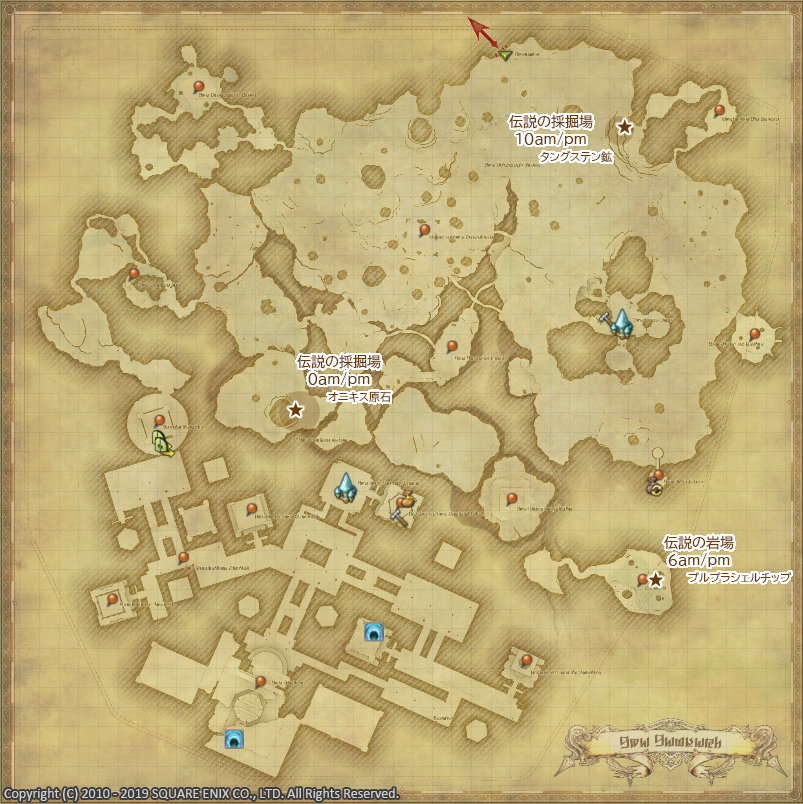
<style>
.page{position:relative;width:803px;height:804px}
.page>*{position:absolute;margin:0}
.t1{font:14px "BIZ-UDPGothic";color:#6a3906}
.t2{font:11px "BIZ-UDPGothic";color:#6a3906}
.t3{font:14px "Calibri";color:#d2d2d2}
</style>
<div class="page">
<p class="t1" style="left:509px;top:114px;width:84px;height:32px;text-align:center">伝説の採掘場<br>10am/pm</p>
<p class="t2" style="left:540px;top:151px;width:72px;height:11px">タングステン鉱</p>
<p class="t1" style="left:297px;top:354px;width:84px;height:32px;text-align:center">伝説の採掘場<br>0am/pm</p>
<p class="t2" style="left:328px;top:391px;width:63px;height:12px">オニキス原石</p>
<p class="t1" style="left:664px;top:535px;width:70px;height:32px;text-align:center">伝説の岩場<br>6am/pm</p>
<p class="t2" style="left:688px;top:572px;width:103px;height:11px">プルプラシェルチップ</p>
<p class="t3" style="left:4px;top:788px;width:395px;height:13px">Copyright (C) 2010 - 2019 SQUARE ENIX CO., LTD. All Rights Reserved.</p>
</div>
